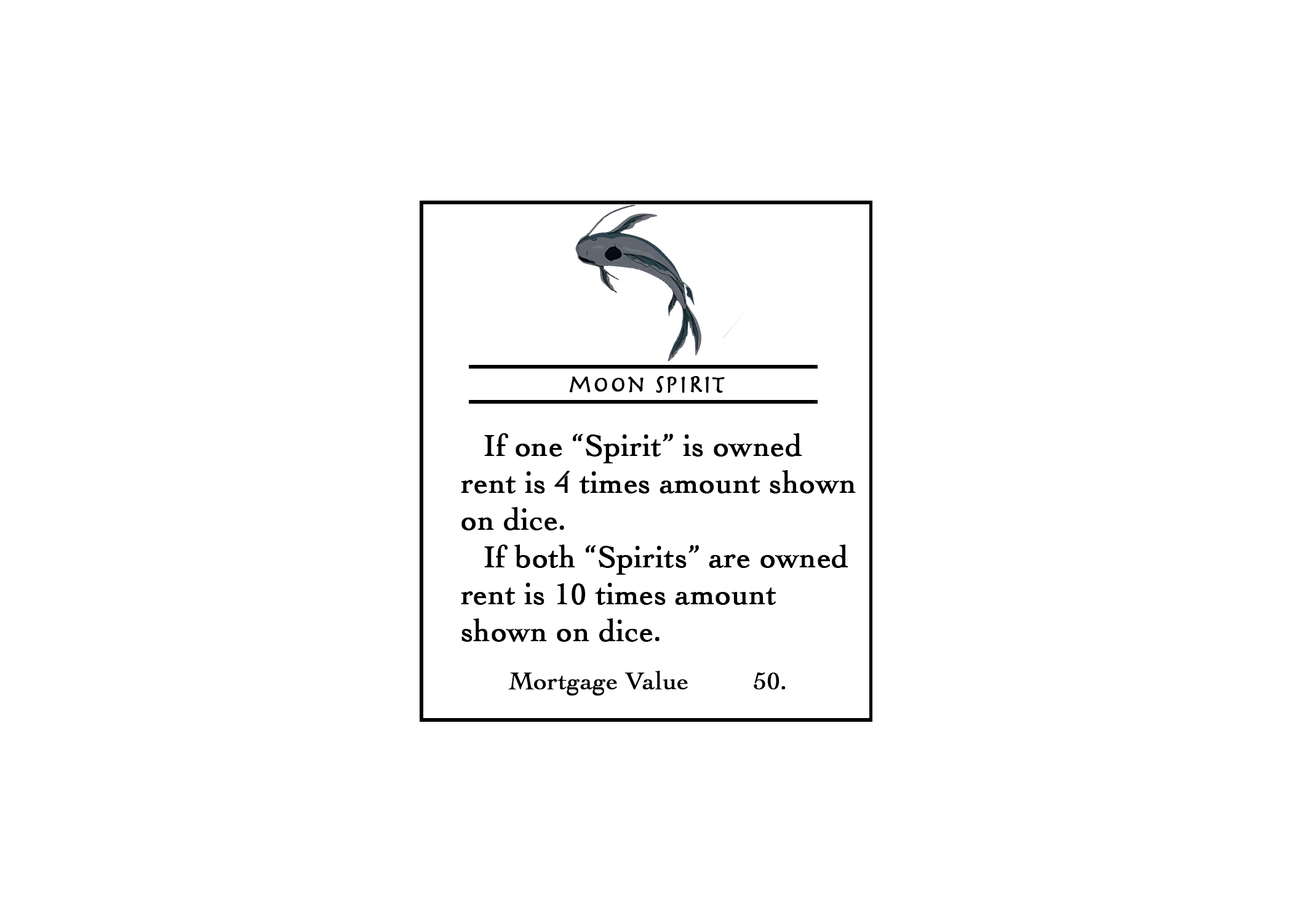
<style>
.page{position:relative;width:1292px;height:923px;background:#ffffff}
.page>*{position:absolute;margin:0}
.t1{font:25.6px "Herculanum";color:#000000;font-weight:bold}
.t2{font:30.8px "Cochin";color:#000000;font-weight:bold}
.t3{font:25.6px "Cochin";color:#000000;font-weight:bold}
</style>
<div class="page">
<p class="t1" style="left:569px;top:376px;width:156px;height:17px">moon spiRit</p>
<p class="t2" style="left:461px;top:433px;width:395px;height:97px">If one “Spirit” is owned <br>rent is 4 times amount shown <br>on dice.</p>
<p class="t2" style="left:461px;top:545px;width:387px;height:97px">If both “Spirits” are owned <br>rent is 10 times amount <br>shown on dice.</p>
<p class="t3" style="left:508px;top:671px;width:278px;height:25px">Mortgage Value         50.</p>
</div>
